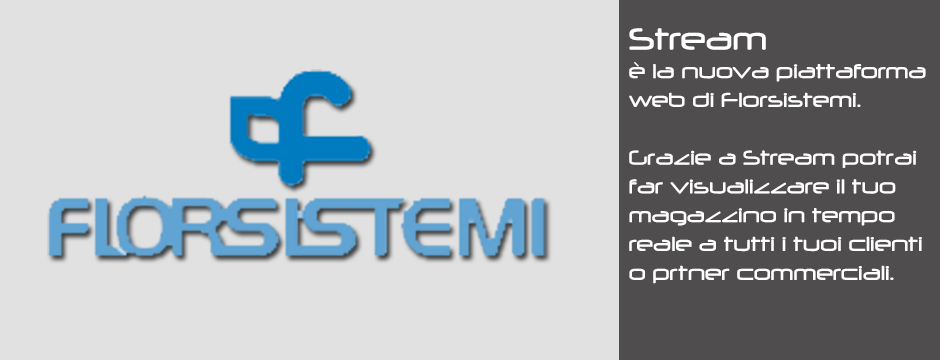
<style>
.page{position:relative;width:940px;height:360px;background:#e1e1e1}
.page>*{position:absolute;margin:0}
.t1{font:24px "Neuropol";color:#ffffff}
.t2{font:36px "Neuropol";color:#ffffff}
</style>
<div class="page">
<p class="t1" style="left:629px;top:28px;width:297px;height:256px"><span class="t2">Stream<br></span>è la nuova piattaforma <br>web di Florsistemi.<br><br>Grazie a Stream potrai<br>far visualizzare il tuo <br>magazzino in tempo <br>reale a tutti i tuoi clienti<br>o prtner commerciali.</p>
</div>
